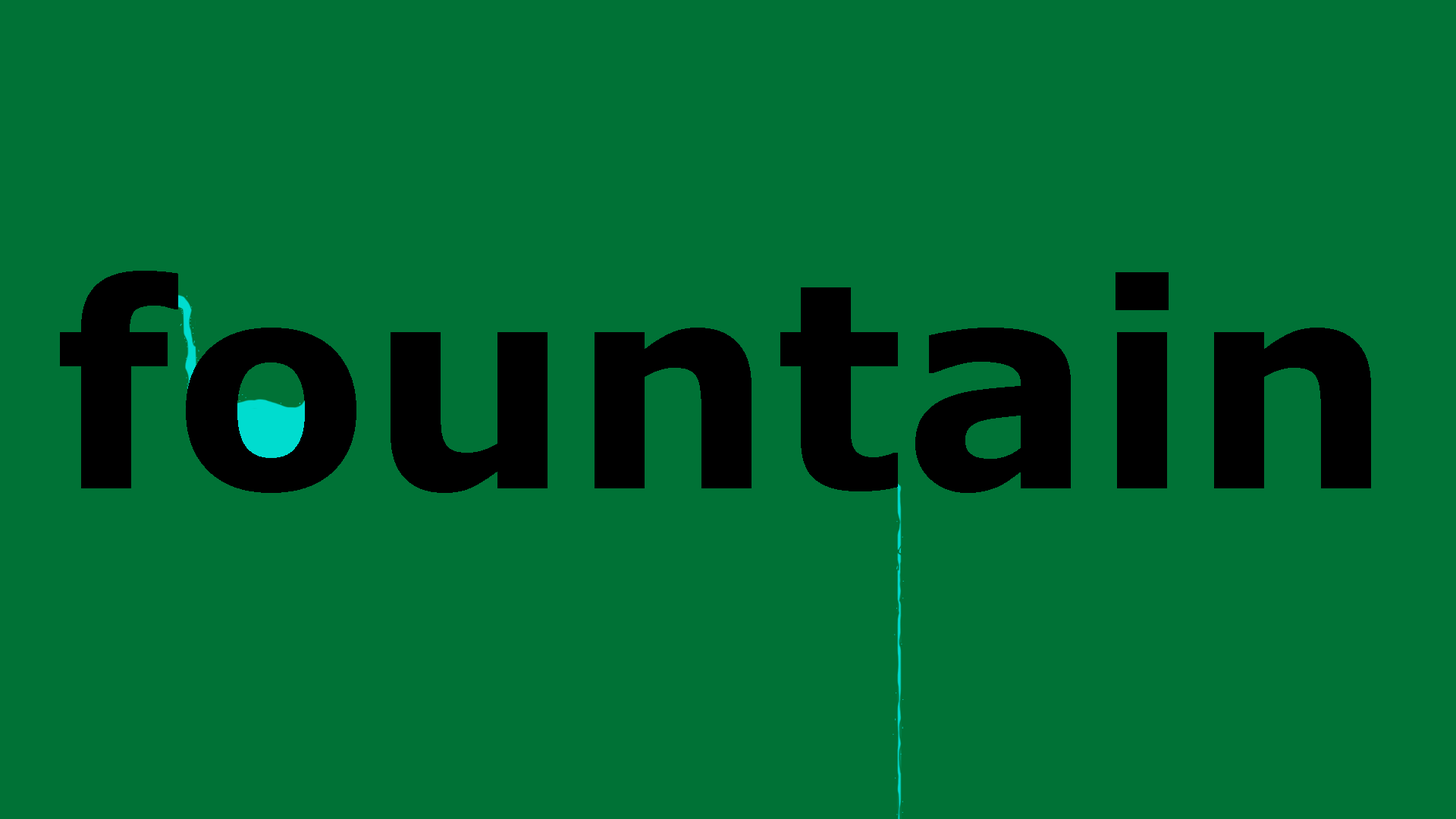
<style>
.page{position:relative;width:1456px;height:819px;background:#007236}
.page>*{position:absolute;margin:0}
.t1{font:284.4px "Verdana-Bold";color:#000000}
</style>
<div class="page">
<p class="t1" style="left:60px;top:271px;width:1311px;height:222px">fountain</p>
</div>
